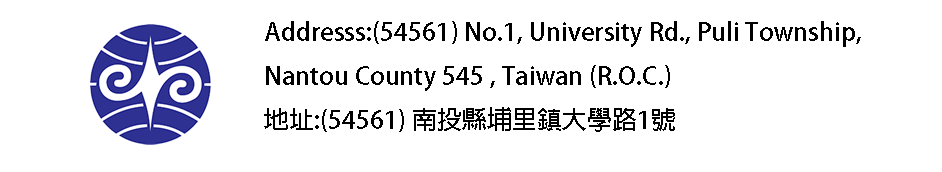
<style>
.page{position:relative;width:942px;height:172px;background:#ffffff}
.page>*{position:absolute;margin:0}
.t1{font:25px "AdobeFanHeitiStd-Bold";color:#000000}
</style>
<div class="page">
<p class="t1" style="left:264px;top:21px;width:597px;height:111px">Addresss:(54561) No.1, University Rd., Puli Township, <br>Nantou County 545 , Taiwan (R.O.C.) <br>地址:(54561) 南投縣埔里鎮大學路1號</p>
</div>
